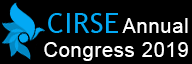
<style>
.page{position:relative;width:192px;height:64px;background:#000000}
.page>*{position:absolute;margin:0}
.t1{font:20px "ArialMT";letter-spacing:0.04em;color:#ffffff}
</style>
<div class="page">
<p class="t1" style="left:44px;top:18px;width:144px;height:43px;text-align:right">Annual<br>  Congress 2019</p>
</div>
